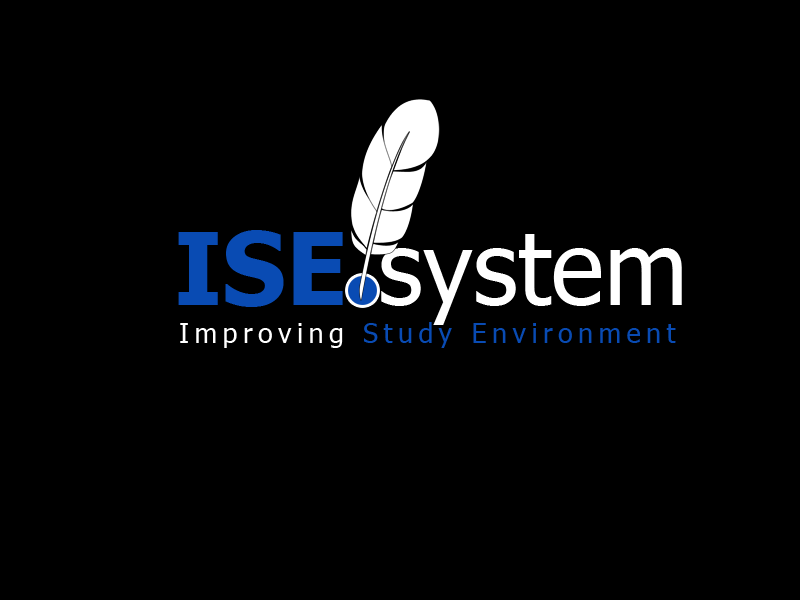
<style>
.page{position:relative;width:800px;height:600px;background:#000000}
.page>*{position:absolute;margin:0}
.t1{font:100px "Tahoma";color:#ffffff}
.t2{font:100px "Tahoma-Bold";color:#094bb3}
.t3{font:27px "Tahoma";letter-spacing:0.2em;color:#094bb3}
.t4{font:27px "Tahoma";letter-spacing:0.2em;color:#ffffff}
</style>
<div class="page">
<p class="t1" style="left:178px;top:230px;width:504px;height:95px"><span class="t2">ISE </span>system</p>
<p class="t3" style="left:180px;top:322px;width:496px;height:26px"><span class="t4">Improving </span>Study Environment</p>
</div>
